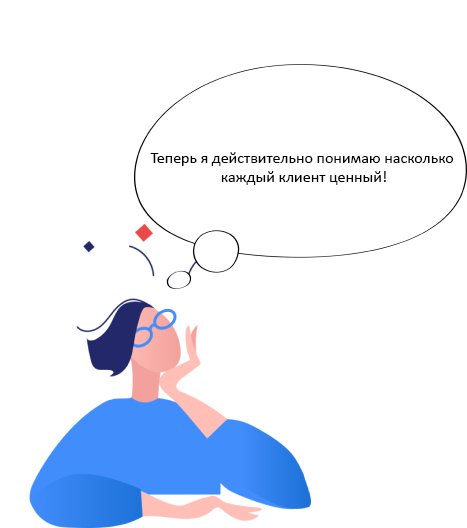
<style>
.page{position:relative;width:467px;height:528px;background:#ffffff}
.page>*{position:absolute;margin:0}
.t1{font:16px "Calibri";color:#000000}
</style>
<div class="page">
<p class="t1" style="left:150px;top:152px;width:304px;height:33px;text-align:center">Теперь я действительно понимаю насколько <br>каждый клиент ценный!</p>
</div>
